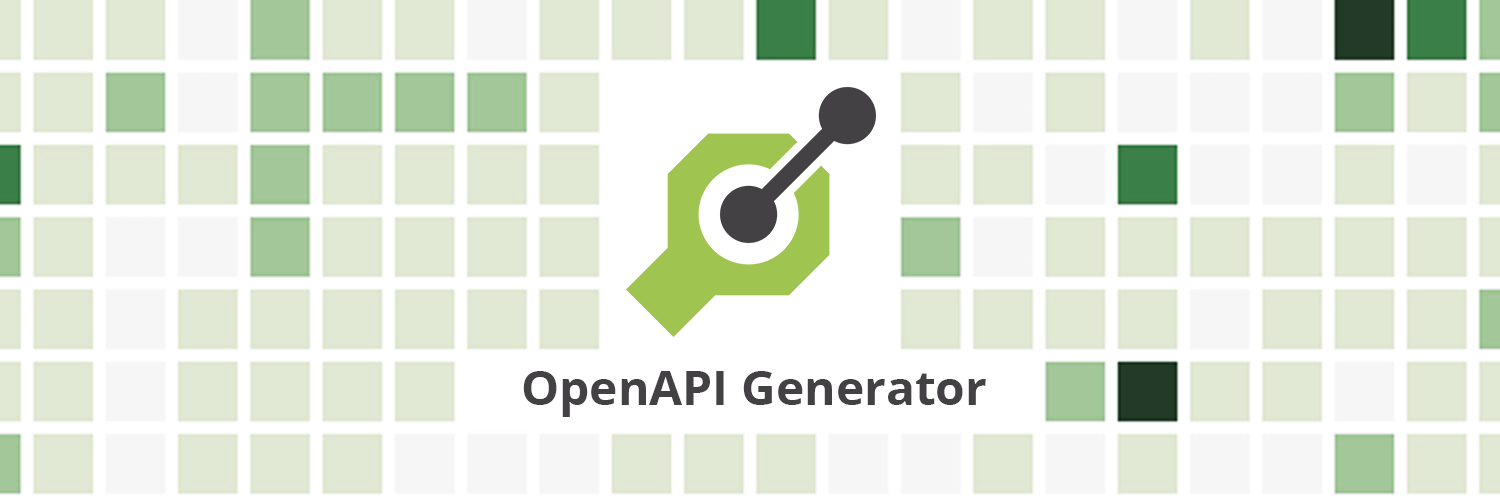
<style>
.page{position:relative;width:1500px;height:500px;background:#ffffff}
.page>*{position:absolute;margin:0}
.t1{font:48px "OpenSans-Bold";color:#434143}
</style>
<div class="page">
<p class="t1" style="left:523px;top:371px;width:463px;height:46px">OpenAPI Generator</p>
</div>
